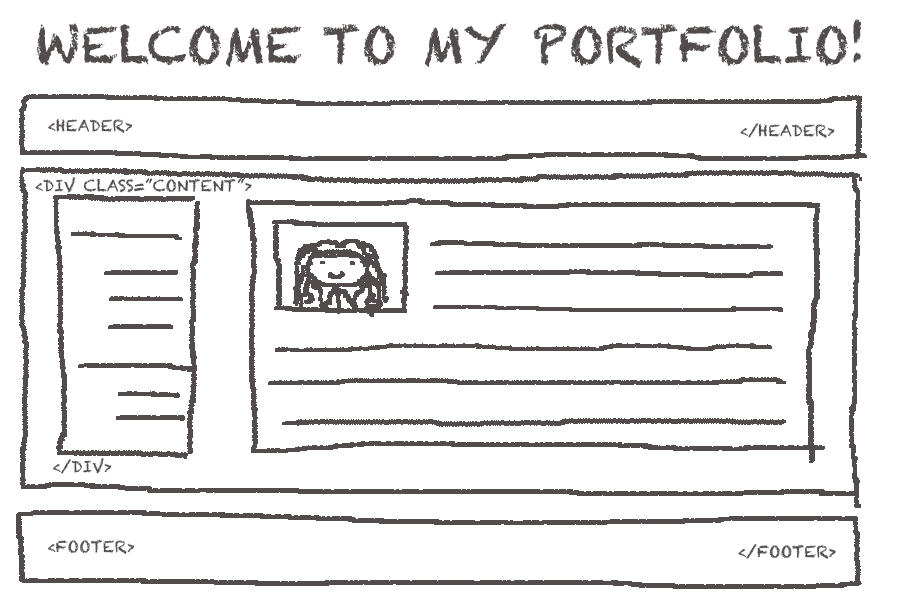
<style>
.page{position:relative;width:900px;height:600px;background:#ffffff}
.page>*{position:absolute;margin:0}
.t1{font:16px "Chalkduster";color:#524c4c;text-transform:uppercase}
</style>
<div class="page">
<p class="t1" style="left:48px;top:119px;width:85px;height:14px">&lt;header&gt;</p>
<p class="t1" style="left:740px;top:123px;width:95px;height:15px">&lt;/header&gt;</p>
<p class="t1" style="left:35px;top:176px;width:217px;height:17px">&lt;div class=”content”&gt;</p>
<p class="t1" style="left:52px;top:457px;width:60px;height:17px">&lt;/div&gt;</p>
<p class="t1" style="left:47px;top:539px;width:88px;height:15px">&lt;footer&gt;</p>
</div>
